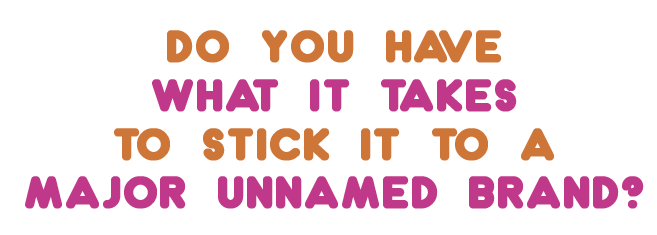
<style>
.page{position:relative;width:657px;height:235px;background:#ffffff}
.page>*{position:absolute;margin:0}
.t1{font:40.7px "Dunkin";color:#bf3889;text-transform:uppercase;font-weight:bold}
.t2{font:40.7px "Dunkin";color:#ce7638;text-transform:uppercase;font-weight:bold}
</style>
<div class="page">
<p class="t1" style="left:25px;top:30px;width:619px;height:179px;text-align:center"><span class="t2">do you have<br></span>what it takes<br><span class="t2">to stick it to a<br></span>major unnamed brand?</p>
</div>
